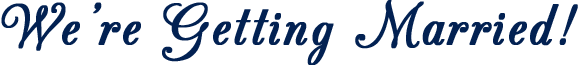
<style>
.page{position:relative;width:581px;height:65px;background:#ffffff}
.page>*{position:absolute;margin:0}
.t1{font:70px "CACChampagne";letter-spacing:0.025em;color:#022152;font-weight:bold}
</style>
<div class="page">
<p class="t1" style="left:1px;top:0px;width:577px;height:65px">We’re Getting Married!</p>
</div>
